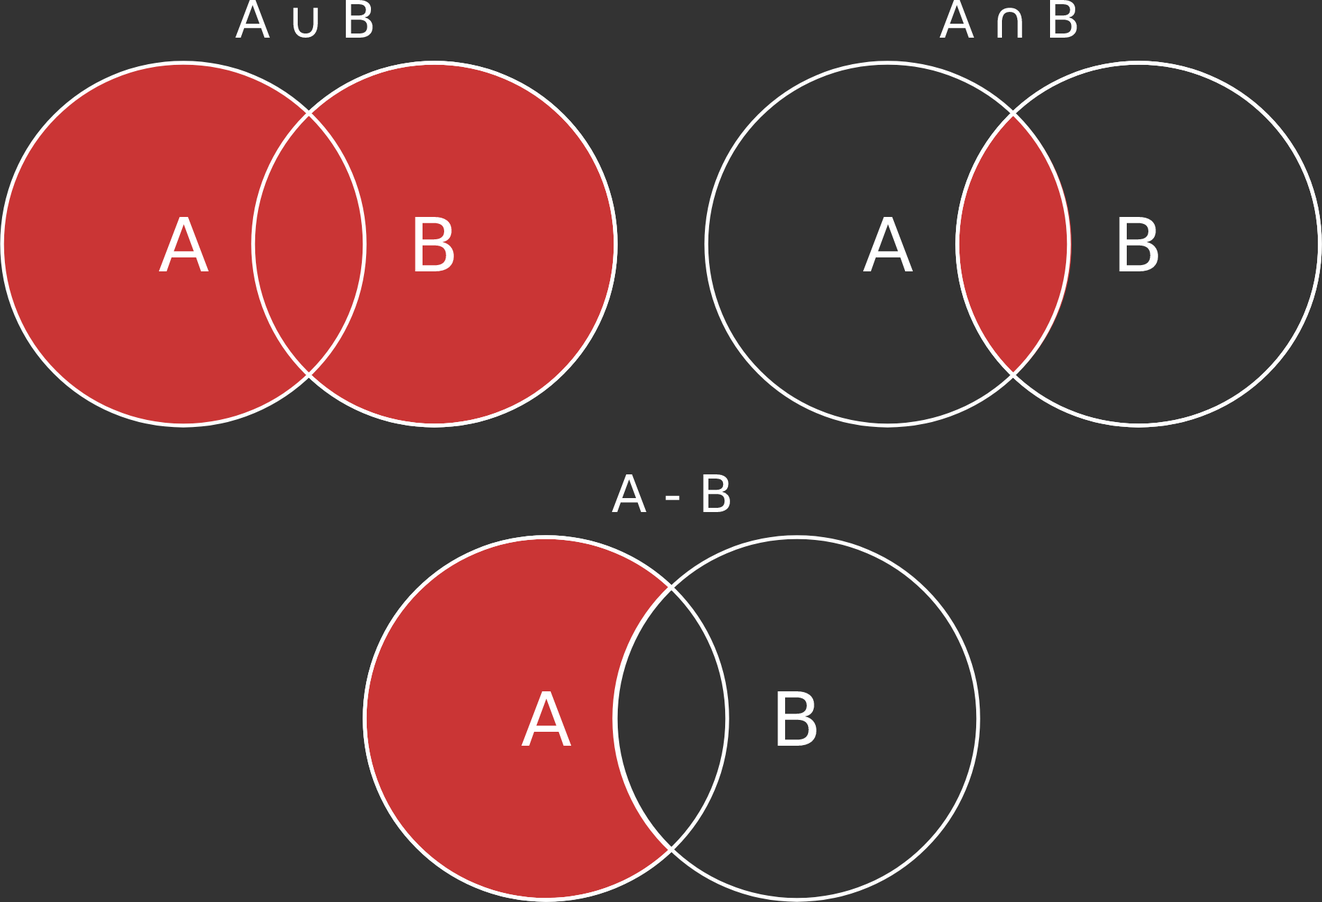
<style>
.page{position:relative;width:1322px;height:902px;background:#333333}
.page>*{position:absolute;margin:0}
.t1{font:51.6px "DejaVuSans";color:#ffffff}
.t2{font:74.6px "DejaVuSans";color:#ffffff}
</style>
<div class="page">
<p class="t1" style="left:235px;top:0px;width:138px;height:38px">A ∪ B</p>
<p class="t1" style="left:939px;top:0px;width:139px;height:38px">A ∩ B</p>
<p class="t2" style="left:158px;top:216px;width:51px;height:55px">A</p>
<p class="t2" style="left:415px;top:216px;width:39px;height:55px">B</p>
<p class="t2" style="left:863px;top:216px;width:51px;height:55px">A</p>
<p class="t2" style="left:1119px;top:216px;width:39px;height:55px">B</p>
<p class="t1" style="left:612px;top:474px;width:118px;height:38px">A - B</p>
<p class="t2" style="left:521px;top:690px;width:51px;height:56px">A</p>
<p class="t2" style="left:778px;top:690px;width:39px;height:56px">B</p>
</div>
